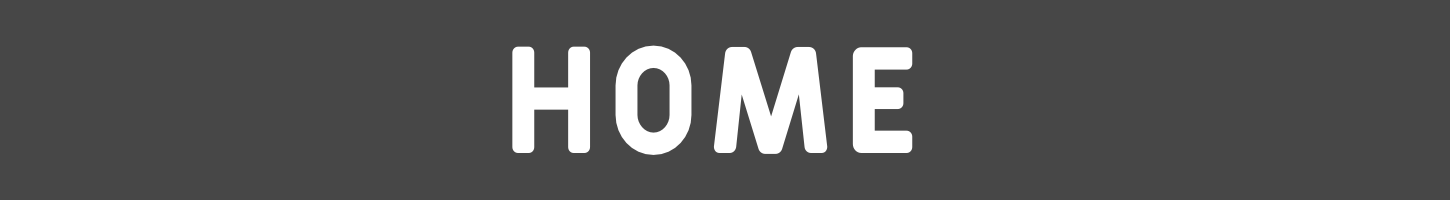
<style>
.page{position:relative;width:1450px;height:200px;background:#474747}
.page>*{position:absolute;margin:0}
.t1{font:150px "Fulbo-Retro";color:#ffffff}
</style>
<div class="page">
<p class="t1" style="left:512px;top:45px;width:401px;height:110px">HOME</p>
</div>
